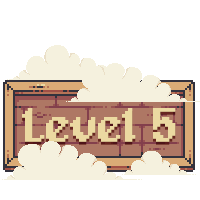
<style>
.page{position:relative;width:200px;height:200px;background:#ffffff}
.page>*{position:absolute;margin:0}
.t1{font:48px "Alagard";letter-spacing:-0.02em;font-weight:bold}
.t2{font:48px "Alagard";letter-spacing:-0.02em;color:#ebd9a1;font-weight:bold}
</style>
<div class="page">
<p class="t1" style="left:22px;top:111px;width:154px;height:34px">Level 5</p>
<p class="t2" style="left:22px;top:108px;width:154px;height:34px">Level 5</p>
</div>
